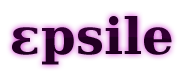
<style>
.page{position:relative;width:183px;height:79px;background:#ffffff}
.page>*{position:absolute;margin:0}
.t1{font:50px "DejaVuSerif-Bold";color:#220022}
</style>
<div class="page">
<p class="t1" style="left:12px;top:16px;width:160px;height:49px">εpsile</p>
</div>
